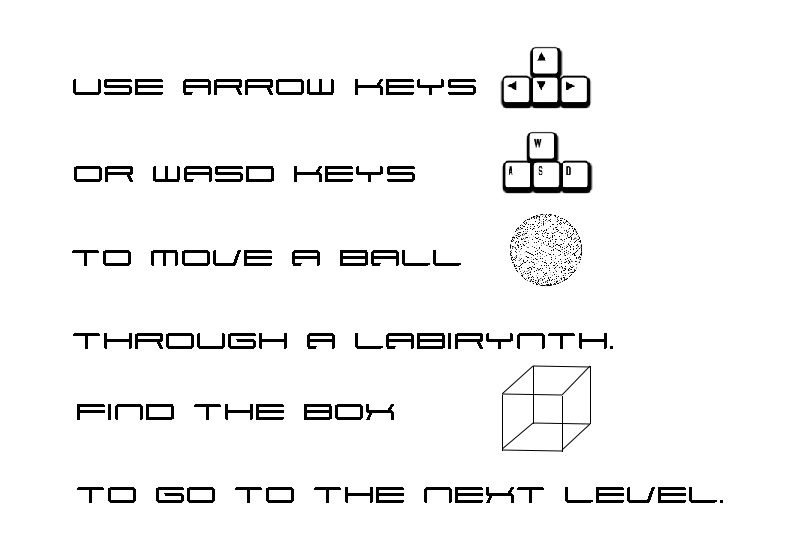
<style>
.page{position:relative;width:800px;height:550px;background:#ffffff}
.page>*{position:absolute;margin:0}
.t1{font:33px "Xenotron";color:#000000}
</style>
<div class="page">
<p class="t1" style="left:73px;top:79px;width:403px;height:16px">use arrow keys</p>
<p class="t1" style="left:74px;top:166px;width:341px;height:16px">or wasd keys</p>
<p class="t1" style="left:72px;top:250px;width:389px;height:16px">to move a ball</p>
<p class="t1" style="left:73px;top:333px;width:540px;height:16px">through a labirynth.</p>
<p class="t1" style="left:77px;top:404px;width:317px;height:16px">find the box</p>
<p class="t1" style="left:77px;top:487px;width:646px;height:16px">to go to the next level.</p>
</div>
